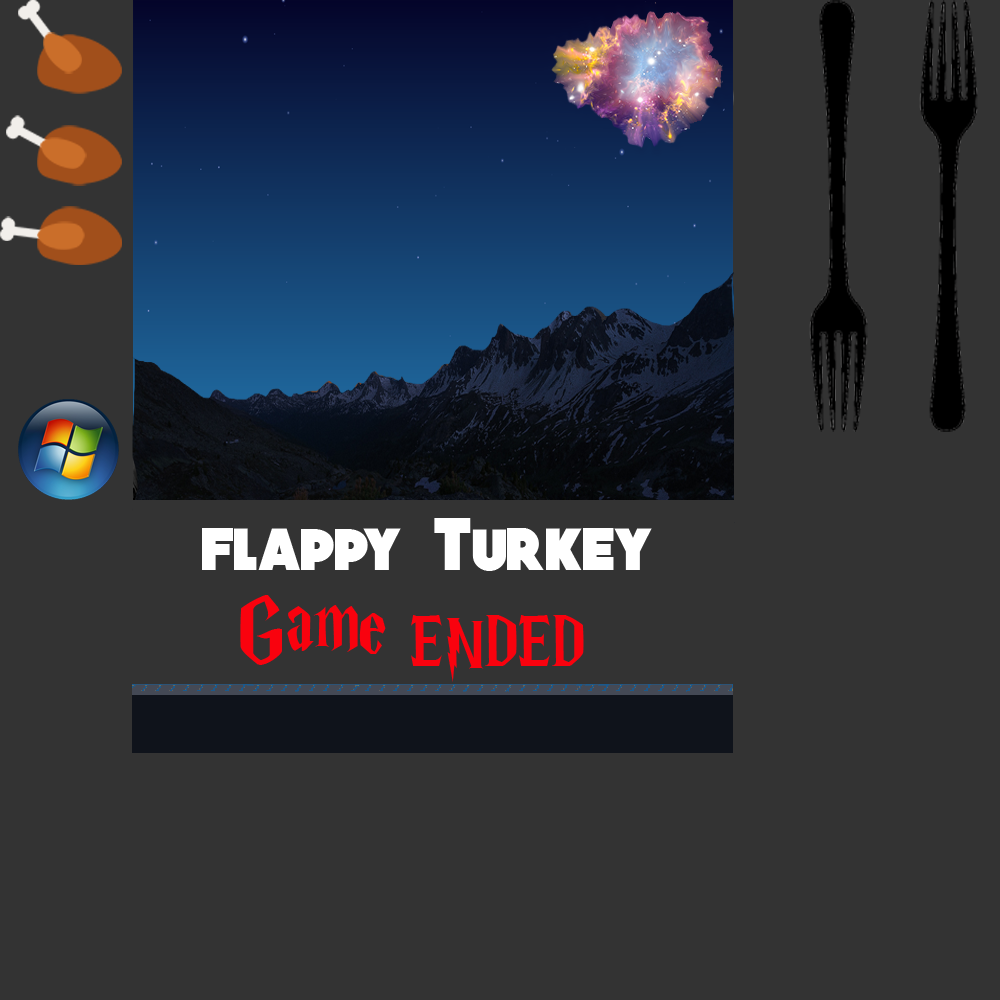
<style>
.page{position:relative;width:1000px;height:1000px;background:#333333}
.page>*{position:absolute;margin:0}
.t1{font:72px "QUARTZOdemo-Bold";color:#ffffff}
.t2{font:72px "HarryP";color:#f9020e}
.t3{font:100px "HarryP";color:#f9020e}
</style>
<div class="page">
<p class="t1" style="left:202px;top:518px;width:450px;height:53px">flappy Turkey</p>
<p class="t2" style="left:240px;top:595px;width:344px;height:87px"><span class="t3">Game</span> ENDED</p>
</div>
